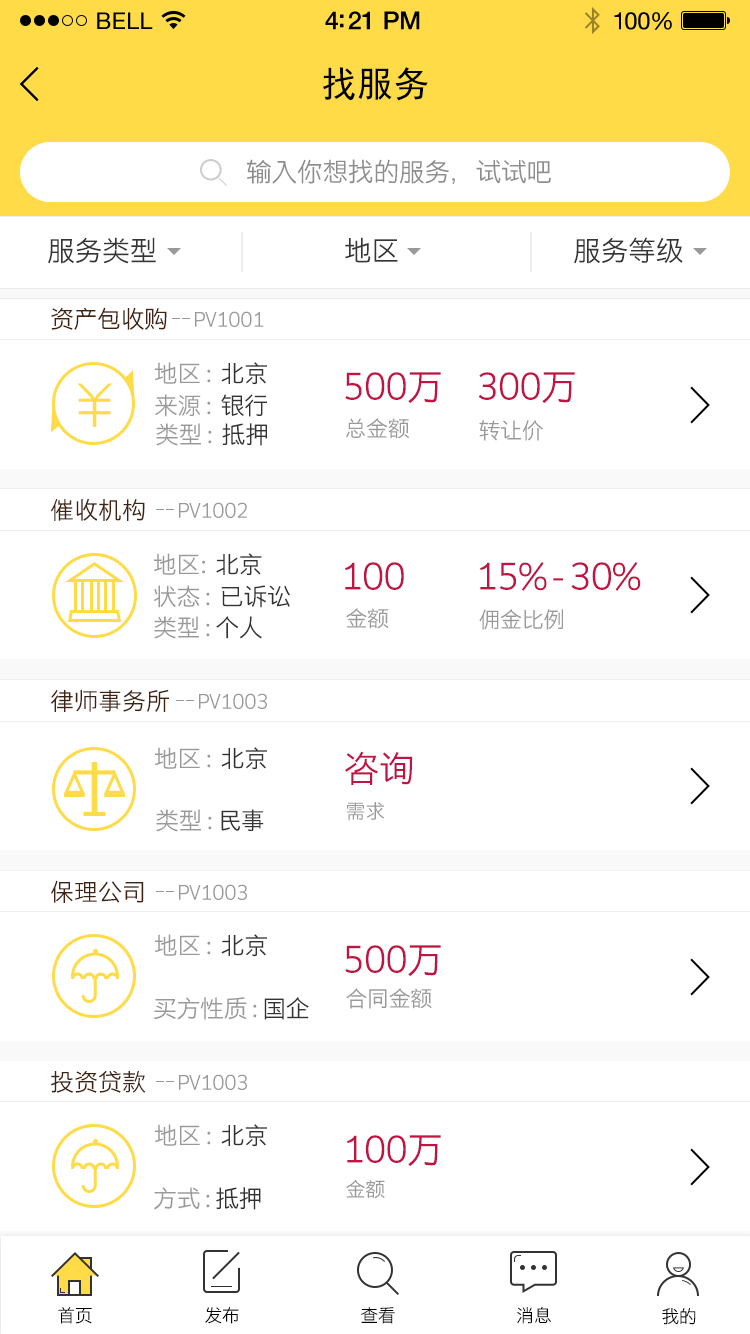
<style>
.page{position:relative;width:750px;height:1334px;background:#ffffff}
.page>*{position:absolute;margin:0}
.t1{font:23px "HelveticaNeue";letter-spacing:0.02em;color:#000000}
.t2{font:25px "HelveticaNeue-Medium";letter-spacing:-0.02em;color:#000000}
.t3{font:24px "HelveticaNeue";letter-spacing:-0.02em;color:#010101}
.t4{font:36px "SimHei";color:#000000}
.t5{font:26px "STHeitiSC-Light";letter-spacing:-0.02em;color:#8d8d8d}
.t6{font:28px "STHeitiSC-Light";letter-spacing:-0.02em;color:#353535}
.t7{font:24px "STHeitiSC-Light";letter-spacing:-0.02em;color:#41210f}
.t8{font:20px "STHeitiSC-Light";letter-spacing:-0.02em;color:#999999}
.t9{font:24px "STHeitiSC-Light";letter-spacing:-0.02em;color:#999999}
.t10{font:24px "STHeitiSC-Light";letter-spacing:-0.02em;color:#333333}
.t11{font:36px "STHeitiSC-Light";letter-spacing:-0.02em;color:#c01444}
.t12{font:22px "STHeitiSC-Light";letter-spacing:-0.02em;color:#999999}
.t13{font:24px "STHeitiSC-Light";color:#41210f}
.t14{font:18px "STHeitiSC-Light";letter-spacing:-0.02em;color:#000000}
</style>
<div class="page">
<p class="t1" style="left:97px;top:12px;width:56px;height:17px">BELL</p>
<p class="t1" style="left:97px;top:12px;width:56px;height:17px">BELL</p>
<p class="t2" style="left:325px;top:11px;width:95px;height:19px">4:21 PM</p>
<p class="t2" style="left:325px;top:11px;width:95px;height:19px">4:21 PM</p>
<p class="t3" style="left:614px;top:12px;width:58px;height:18px">100%</p>
<p class="t3" style="left:614px;top:12px;width:58px;height:18px">100%</p>
<p class="t4" style="left:323px;top:67px;width:105px;height:34px">找服务</p>
<p class="t5" style="left:247px;top:159px;width:304px;height:25px">输入你想找的服务，试试吧</p>
<p class="t6" style="left:48px;top:237px;width:108px;height:27px">服务类型</p>
<p class="t6" style="left:345px;top:237px;width:53px;height:26px">地区</p>
<p class="t6" style="left:574px;top:237px;width:109px;height:27px">服务等级</p>
<p class="t7" style="left:51px;top:307px;width:116px;height:23px">资产包收购</p>
<p class="t8" style="left:195px;top:311px;width:69px;height:16px">PV1001</p>
<p class="t9" style="left:155px;top:362px;width:112px;height:23px">地区 :  <span class="t10">北京</span></p>
<p class="t11" style="left:345px;top:372px;width:96px;height:32px">500万</p>
<p class="t11" style="left:478px;top:372px;width:97px;height:32px">300万</p>
<p class="t9" style="left:155px;top:394px;width:112px;height:23px">来源 :  <span class="t10">银行</span></p>
<p class="t9" style="left:156px;top:423px;width:111px;height:23px">类型 :  <span class="t10">抵押</span></p>
<p class="t12" style="left:346px;top:418px;width:63px;height:21px">总金额</p>
<p class="t12" style="left:479px;top:420px;width:64px;height:21px">转让价</p>
<p class="t13" style="left:50px;top:498px;width:95px;height:23px">催收机构</p>
<p class="t8" style="left:179px;top:502px;width:68px;height:16px">PV1002</p>
<p class="t9" style="left:154px;top:553px;width:108px;height:23px">地区:  <span class="t10">北京</span></p>
<p class="t11" style="left:345px;top:562px;width:59px;height:28px">100</p>
<p class="t11" style="left:480px;top:562px;width:161px;height:29px">15% - 30%</p>
<p class="t9" style="left:154px;top:585px;width:136px;height:23px">状态 :  <span class="t10">已诉讼</span></p>
<p class="t9" style="left:154px;top:616px;width:108px;height:23px">类型 : <span class="t10">个人</span></p>
<p class="t12" style="left:346px;top:608px;width:43px;height:21px">金额</p>
<p class="t12" style="left:479px;top:609px;width:84px;height:21px">佣金比例</p>
<p class="t13" style="left:51px;top:689px;width:118px;height:23px">律师事务所</p>
<p class="t8" style="left:199px;top:693px;width:68px;height:16px">PV1003</p>
<p class="t9" style="left:155px;top:747px;width:112px;height:23px">地区 :  <span class="t10">北京</span></p>
<p class="t11" style="left:345px;top:751px;width:68px;height:34px">咨询</p>
<p class="t9" style="left:156px;top:809px;width:108px;height:23px">类型 : <span class="t10">民事</span></p>
<p class="t8" style="left:346px;top:802px;width:38px;height:19px">需求</p>
<p class="t13" style="left:51px;top:880px;width:93px;height:23px">保理公司</p>
<p class="t8" style="left:179px;top:884px;width:68px;height:16px">PV1003</p>
<p class="t9" style="left:155px;top:934px;width:112px;height:23px">地区 :  <span class="t10">北京</span></p>
<p class="t11" style="left:345px;top:945px;width:96px;height:32px">500万</p>
<p class="t12" style="left:346px;top:988px;width:86px;height:21px">合同金额</p>
<p class="t9" style="left:154px;top:997px;width:155px;height:23px">买方性质 : <span class="t10">国企</span></p>
<p class="t13" style="left:51px;top:1070px;width:95px;height:23px">投资贷款</p>
<p class="t8" style="left:179px;top:1074px;width:68px;height:16px">PV1003</p>
<p class="t9" style="left:155px;top:1124px;width:112px;height:23px">地区 :  <span class="t10">北京</span></p>
<p class="t11" style="left:347px;top:1135px;width:94px;height:32px">100万</p>
<p class="t8" style="left:346px;top:1179px;width:39px;height:20px">金额</p>
<p class="t9" style="left:154px;top:1187px;width:107px;height:23px">方式 : <span class="t10">抵押</span></p>
<p class="t14" style="left:58px;top:1307px;width:34px;height:17px">首页</p>
<p class="t14" style="left:205px;top:1307px;width:34px;height:17px">发布</p>
<p class="t14" style="left:361px;top:1307px;width:34px;height:17px">查看</p>
<p class="t14" style="left:517px;top:1306px;width:34px;height:18px">消息</p>
<p class="t14" style="left:662px;top:1308px;width:34px;height:17px">我的</p>
</div>
